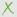
<style>
.page{position:relative;width:17px;height:17px;background:#e5e5e5}
.page>*{position:absolute;margin:0}
.t1{font:25px "BradleyHandITC";letter-spacing:-0.03em}
</style>
<div class="page">
<p class="t1" style="left:2px;top:2px;width:12px;height:14px">x</p>
</div>
